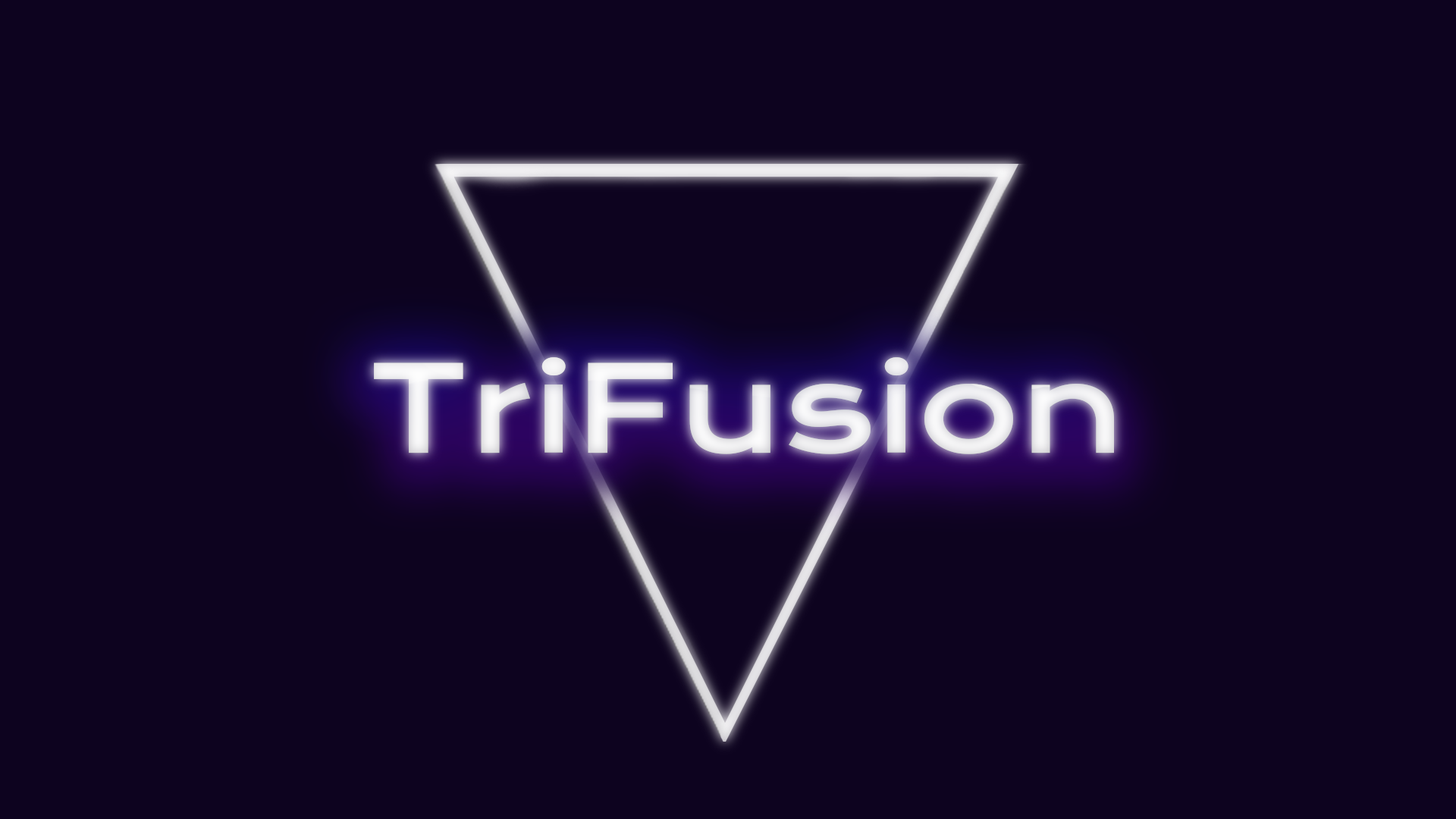
<style>
.page{position:relative;width:1456px;height:819px;background:#0d031f}
.page>*{position:absolute;margin:0}
.t1{font:117.6px "KronaOne-Regular";letter-spacing:0.005em;color:#ffffff;scale:1.05 1}
</style>
<div class="page">
<p class="t1" style="left:374px;top:357px;width:740px;height:97px;opacity:0.41">TriFusion</p>
<p class="t1" style="left:374px;top:357px;width:740px;height:97px;opacity:0.64">TriFusion</p>
<p class="t1" style="left:374px;top:357px;width:740px;height:97px;opacity:0.46">TriFusion</p>
</div>
